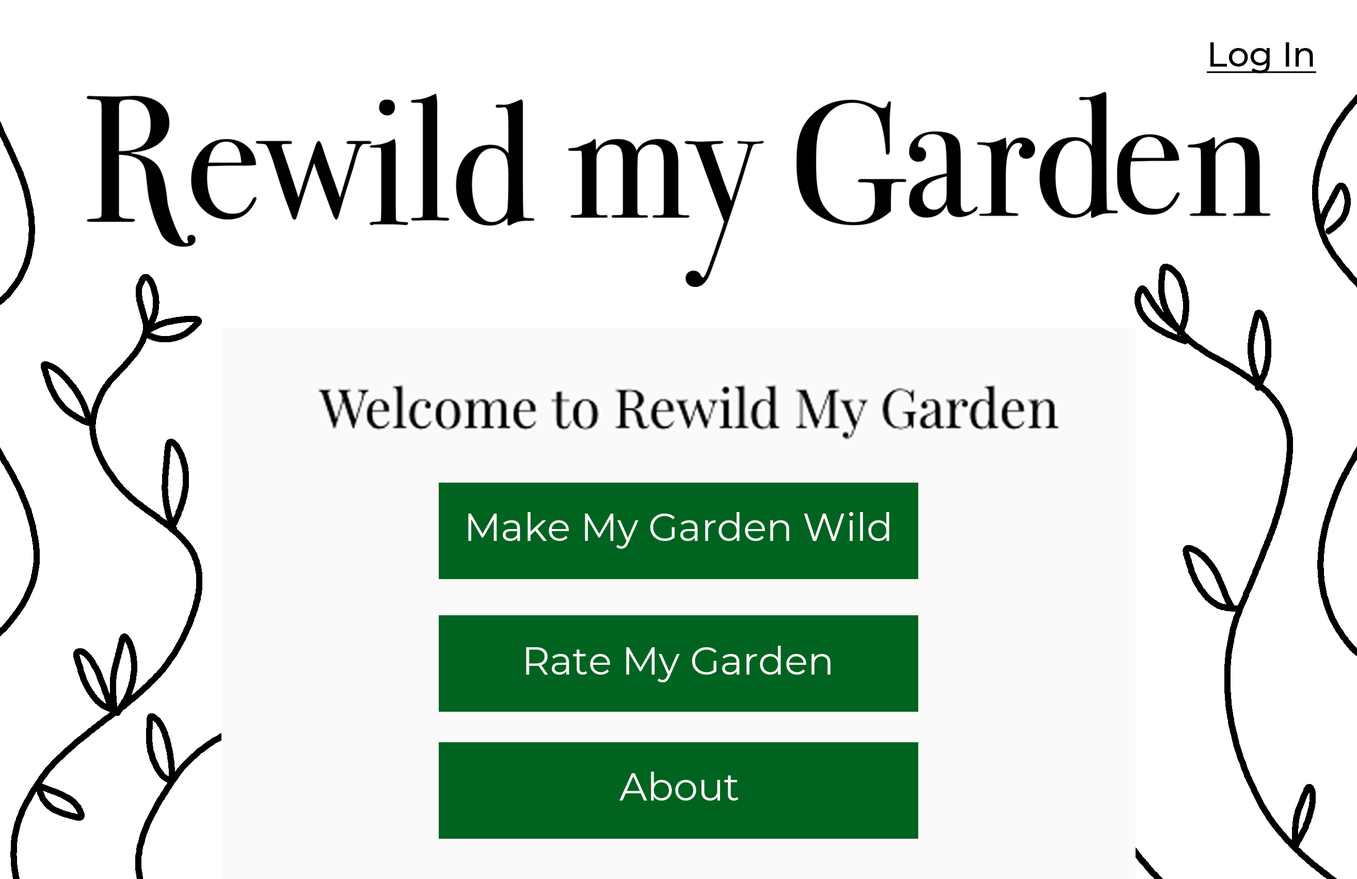
<style>
.page{position:relative;width:1357px;height:879px;background:#ffffff}
.page>*{position:absolute;margin:0}
.t1{font:34.4px "Montserrat-Medium";color:#000000;text-decoration:underline}
.t2{font:38.7px "Montserrat-Regular";color:#ffffff}
</style>
<div class="page">
<p class="t1" style="left:1206px;top:42px;width:110px;height:31px">Log In</p>
<p class="t2" style="left:468px;top:512px;width:421px;height:37px">Make My Garden Wild</p>
<p class="t2" style="left:526px;top:646px;width:304px;height:36px">Rate My Garden</p>
<p class="t2" style="left:619px;top:772px;width:120px;height:28px">About</p>
</div>
